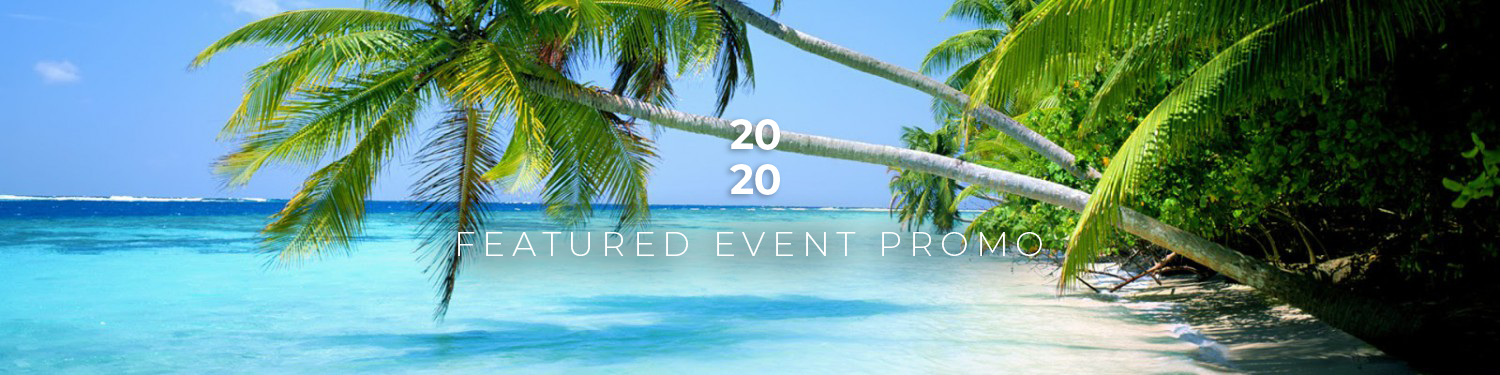
<style>
.page{position:relative;width:1500px;height:375px}
.page>*{position:absolute;margin:0}
.t1{font:41px/45.5px "Montserrat-Bold";color:#ffffff}
.t2{font:34.1px "Montserrat-Light";letter-spacing:0.2em;color:#ffffff;text-transform:uppercase}
</style>
<div class="page">
<p class="t1" style="left:730px;top:119px;width:50px;height:76px">2020</p>
<p class="t2" style="left:458px;top:232px;width:584px;height:24px">featured event promo</p>
</div>
